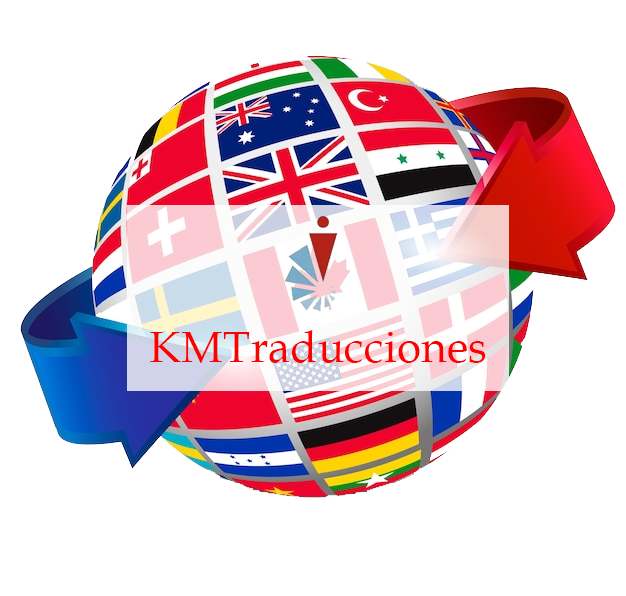
<style>
.page{position:relative;width:626px;height:596px;background:#ffffff}
.page>*{position:absolute;margin:0}
.t1{font:44.4px "BookAntiqua";color:#ff0000}
</style>
<div class="page">
<p class="t1" style="left:150px;top:330px;width:336px;height:33px">KMTraducciones</p>
</div>
